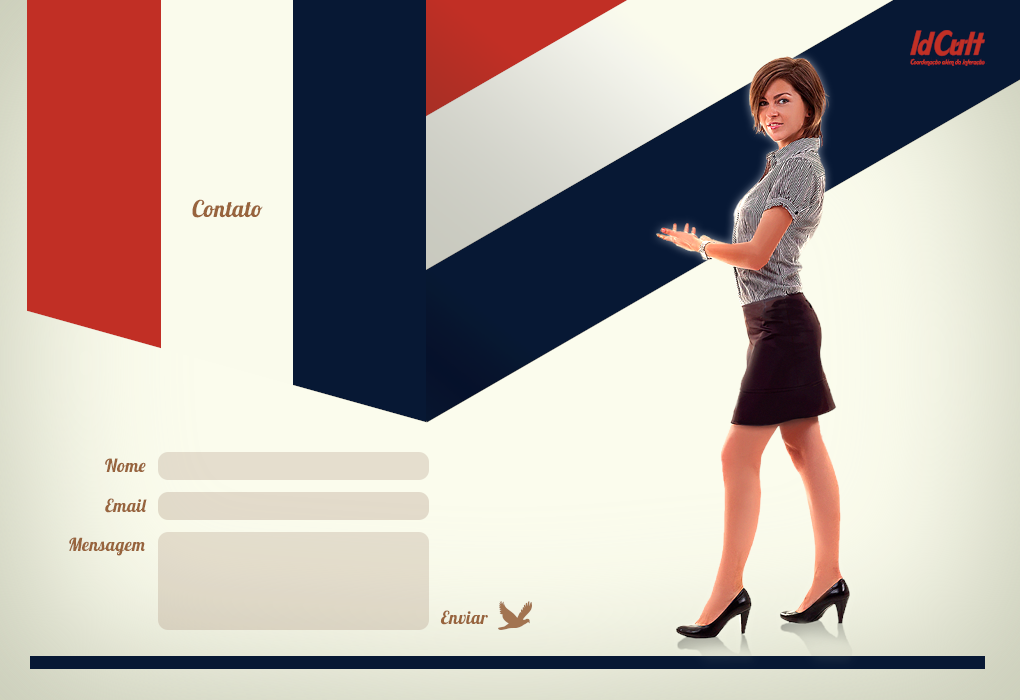
<style>
.page{position:relative;width:1020px;height:700px}
.page>*{position:absolute;margin:0}
.t1{font:23px "Lobster";letter-spacing:0.02em;color:#98643d}
.t2{font:18px "Lobster";letter-spacing:0.02em;color:#98643d}
</style>
<div class="page">
<p class="t1" style="left:192px;top:199px;width:71px;height:19px">Contato</p>
<p class="t2" style="left:105px;top:458px;width:41px;height:14px">Nome</p>
<p class="t2" style="left:105px;top:498px;width:42px;height:15px">Email</p>
<p class="t2" style="left:69px;top:537px;width:76px;height:19px">Mensagem</p>
<p class="t2" style="left:440px;top:610px;width:48px;height:15px">Enviar</p>
</div>
